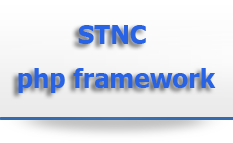
<style>
.page{position:relative;width:233px;height:143px}
.page>*{position:absolute;margin:0}
.t1{font:25.7px/14px "Verdana-Bold";letter-spacing:-0.025em;color:#2862e5;scale:0.93 1}
</style>
<div class="page">
<p class="t1" style="left:18px;top:25px;width:198px;height:68px;text-align:center">STNC <br>php framework</p>
</div>
